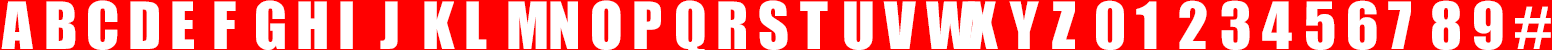
<style>
.page{position:relative;width:1552px;height:50px;background:#ff0000}
.page>*{position:absolute;margin:0}
.t1{font:60px "Impact";color:#ffffff}
</style>
<div class="page">
<p class="t1" style="left:1px;top:1px;width:32px;height:48px">A</p>
<p class="t1" style="left:46px;top:1px;width:30px;height:48px">B</p>
<p class="t1" style="left:88px;top:0px;width:30px;height:50px">C</p>
<p class="t1" style="left:130px;top:1px;width:29px;height:48px">D</p>
<p class="t1" style="left:172px;top:1px;width:22px;height:48px">E</p>
<p class="t1" style="left:214px;top:1px;width:22px;height:48px">F</p>
<p class="t1" style="left:256px;top:0px;width:29px;height:50px">G</p>
<p class="t1" style="left:298px;top:1px;width:29px;height:48px">H</p>
<p class="t1" style="left:340px;top:1px;width:13px;height:48px">I</p>
<p class="t1" style="left:380px;top:1px;width:18px;height:48px">J</p>
<p class="t1" style="left:424px;top:1px;width:31px;height:48px">K</p>
<p class="t1" style="left:466px;top:1px;width:21px;height:48px">L</p>
<p class="t1" style="left:508px;top:1px;width:39px;height:48px">M</p>
<p class="t1" style="left:550px;top:1px;width:28px;height:48px">N</p>
<p class="t1" style="left:592px;top:0px;width:29px;height:50px">O</p>
<p class="t1" style="left:634px;top:1px;width:27px;height:48px">P</p>
<p class="t1" style="left:718px;top:1px;width:28px;height:48px">R</p>
<p class="t1" style="left:759px;top:0px;width:29px;height:50px">S</p>
<p class="t1" style="left:800px;top:1px;width:28px;height:48px">T</p>
<p class="t1" style="left:844px;top:1px;width:29px;height:49px">U</p>
<p class="t1" style="left:883px;top:1px;width:33px;height:48px">V</p>
<p class="t1" style="left:926px;top:1px;width:49px;height:48px">W</p>
<p class="t1" style="left:968px;top:1px;width:30px;height:48px">X</p>
<p class="t1" style="left:1009px;top:1px;width:30px;height:48px">Y</p>
<p class="t1" style="left:1052px;top:1px;width:23px;height:48px">Z</p>
<p class="t1" style="left:1096px;top:0px;width:28px;height:50px">0</p>
<p class="t1" style="left:1136px;top:1px;width:21px;height:48px">1</p>
<p class="t1" style="left:1179px;top:0px;width:28px;height:49px">2</p>
<p class="t1" style="left:1221px;top:0px;width:29px;height:50px">3</p>
<p class="t1" style="left:1262px;top:1px;width:30px;height:48px">4</p>
<p class="t1" style="left:1306px;top:1px;width:29px;height:49px">5</p>
<p class="t1" style="left:1348px;top:0px;width:29px;height:50px">6</p>
<p class="t1" style="left:1388px;top:1px;width:23px;height:48px">7</p>
<p class="t1" style="left:1432px;top:0px;width:28px;height:50px">8</p>
<p class="t1" style="left:1474px;top:0px;width:29px;height:50px">9</p>
<p class="t1" style="left:1515px;top:6px;width:36px;height:43px">#</p>
</div>
